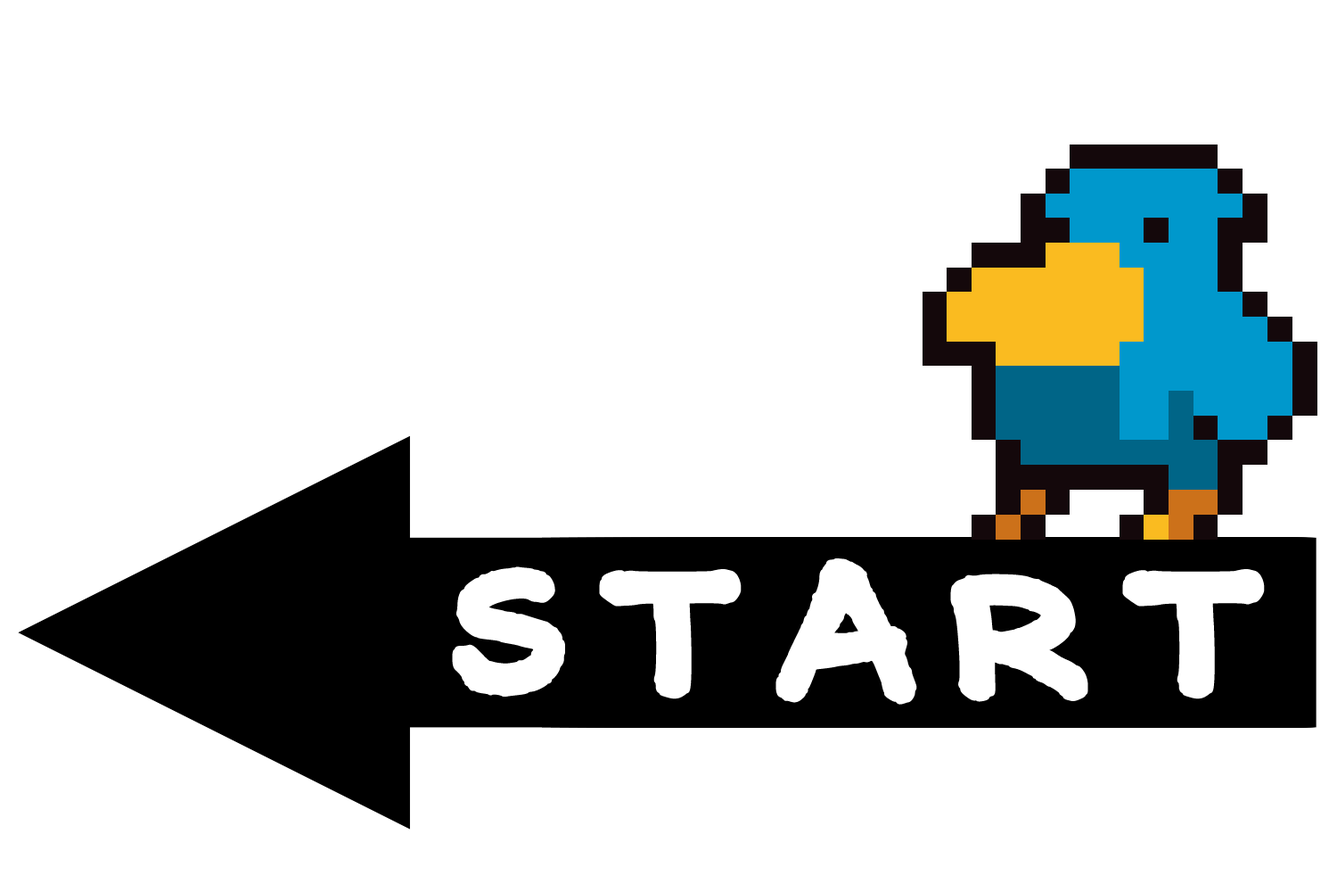
<style>
.page{position:relative;width:1337px;height:892px;background:#ffffff}
.page>*{position:absolute;margin:0}
.t1{font:178.3px "ComiquitaSans";color:#ffffff;font-weight:bold;scale:1.24 1}
</style>
<div class="page">
<p class="t1" style="left:452px;top:558px;width:813px;height:146px">START</p>
</div>
